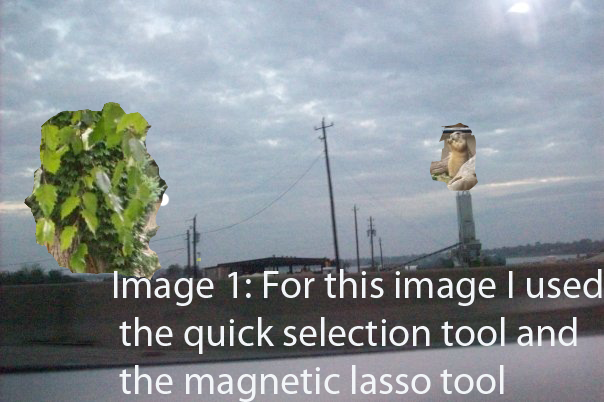
<style>
.page{position:relative;width:604px;height:402px}
.page>*{position:absolute;margin:0}
.t1{font:40px "MyriadPro-Regular";color:#f2f5f8}
</style>
<div class="page">
<p class="t1" style="left:114px;top:269px;width:488px;height:133px">Image 1: For this image I used<br> the quick selection tool and<br> the magnetic lasso tool</p>
</div>
